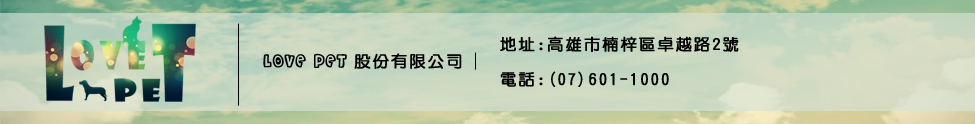
<style>
.page{position:relative;width:975px;height:124px}
.page>*{position:absolute;margin:0}
.t1{font:16px "DFYuan-Bd-HK-BF";letter-spacing:0.12em;color:#000000;font-weight:bold}
.t2{font:16px "CheriLiney";letter-spacing:0.12em;color:#000000;font-weight:bold}
.t3{font:16px "DFYuan-Bd-HKP-BF";letter-spacing:0.12em;color:#000000;font-weight:bold}
</style>
<div class="page">
<p class="t1" style="left:500px;top:36px;width:239px;height:16px">地址:高雄市楠梓區卓越路2號</p>
<p class="t2" style="left:263px;top:53px;width:199px;height:16px">LOVE PET <span class="t3">股份有限公司</span></p>
<p class="t1" style="left:500px;top:71px;width:169px;height:16px">電話:(07)601-1000</p>
</div>
